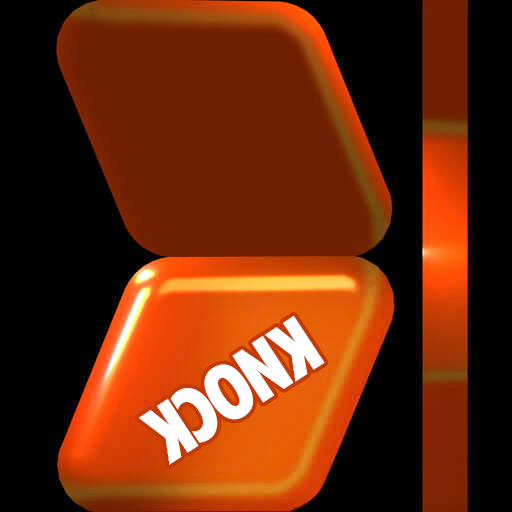
<style>
.page{position:relative;width:512px;height:512px;background:#000000}
.page>*{position:absolute;margin:0}
.t1{font:80px "VVDSFifties-SCondSBold";color:#ffffff}
</style>
<div class="page">
<p class="t1" style="left:138px;top:315px;width:187px;height:150px;rotate:147deg">KNOCK</p>
</div>
